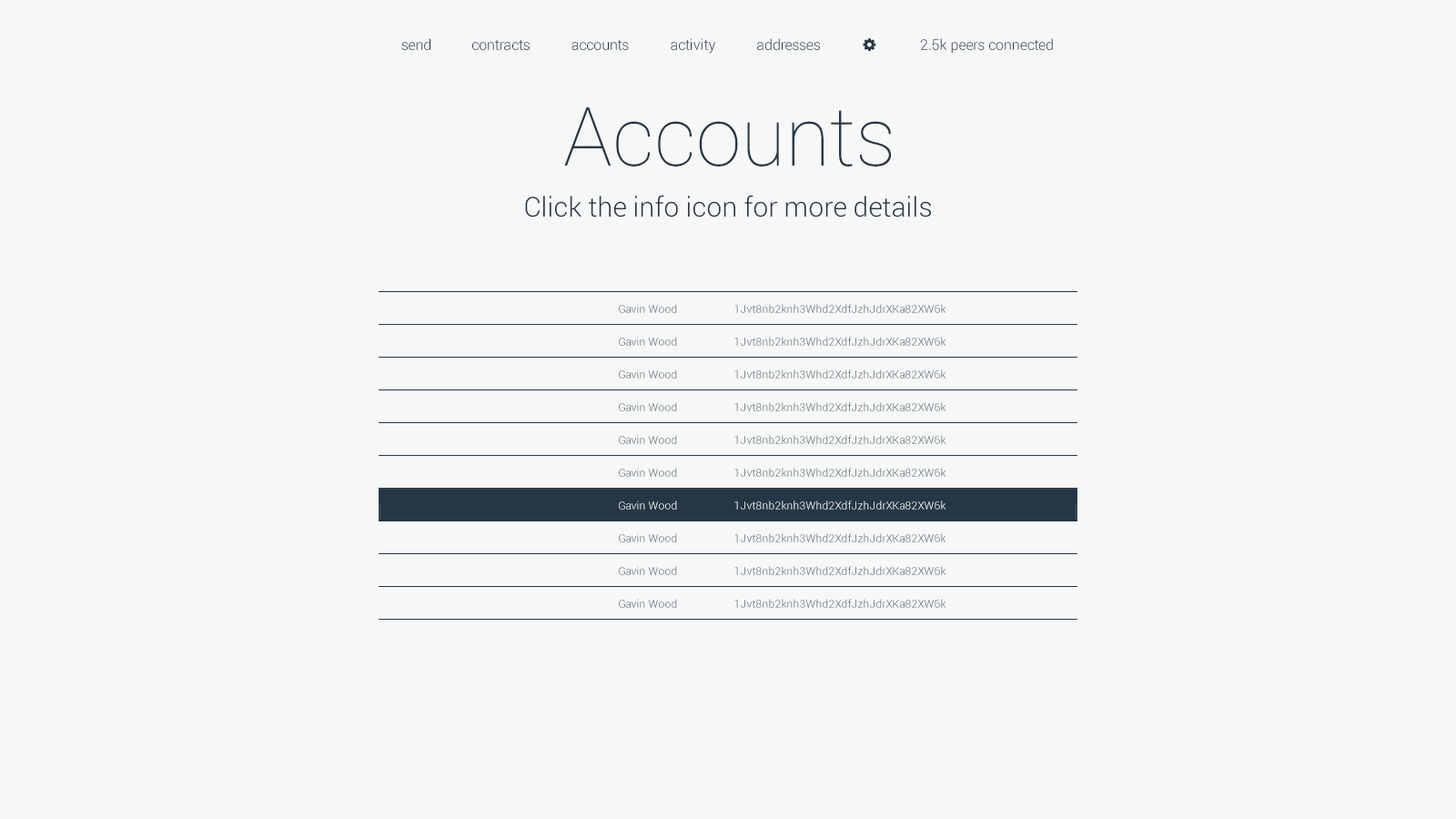
<style>
.page{position:relative;width:1456px;height:819px;background:#f6f7f7}
.page>*{position:absolute;margin:0}
.t1{font:14.6px "Roboto-Light";color:#253746}
.t2{font:81.9px "Roboto-Thin";color:#253746}
.t3{font:27.3px "Roboto-Light";color:#253746}
.t4{font:10.9px "Roboto-Light"}
.t5{font:10.9px "Roboto-Light";color:#ffffff}
</style>
<div class="page">
<p class="t1" style="left:401px;top:38px;width:29px;height:12px">send</p>
<p class="t1" style="left:472px;top:40px;width:58px;height:10px">contracts</p>
<p class="t1" style="left:571px;top:40px;width:58px;height:10px">accounts</p>
<p class="t1" style="left:671px;top:38px;width:44px;height:16px">activity</p>
<p class="t1" style="left:757px;top:38px;width:63px;height:12px">addresses</p>
<p class="t1" style="left:920px;top:38px;width:133px;height:15px">2.5k peers connected</p>
<p class="t2" style="left:564px;top:107px;width:327px;height:60px">Accounts</p>
<p class="t3" style="left:525px;top:195px;width:406px;height:22px">Click the info icon for more details</p>
<p class="t4" style="left:619px;top:304px;width:58px;height:9px">Gavin Wood</p>
<p class="t4" style="left:734px;top:304px;width:212px;height:9px">1Jvt8nb2knh3Whd2XdfJzhJdrXKa82XW6k</p>
<p class="t4" style="left:619px;top:337px;width:58px;height:9px">Gavin Wood</p>
<p class="t4" style="left:734px;top:337px;width:212px;height:9px">1Jvt8nb2knh3Whd2XdfJzhJdrXKa82XW6k</p>
<p class="t4" style="left:619px;top:369px;width:58px;height:10px">Gavin Wood</p>
<p class="t4" style="left:734px;top:369px;width:212px;height:10px">1Jvt8nb2knh3Whd2XdfJzhJdrXKa82XW6k</p>
<p class="t4" style="left:619px;top:402px;width:58px;height:9px">Gavin Wood</p>
<p class="t4" style="left:734px;top:402px;width:212px;height:9px">1Jvt8nb2knh3Whd2XdfJzhJdrXKa82XW6k</p>
<p class="t4" style="left:619px;top:435px;width:58px;height:9px">Gavin Wood</p>
<p class="t4" style="left:734px;top:435px;width:212px;height:9px">1Jvt8nb2knh3Whd2XdfJzhJdrXKa82XW6k</p>
<p class="t4" style="left:619px;top:468px;width:58px;height:9px">Gavin Wood</p>
<p class="t4" style="left:734px;top:468px;width:212px;height:9px">1Jvt8nb2knh3Whd2XdfJzhJdrXKa82XW6k</p>
<p class="t5" style="left:619px;top:500px;width:58px;height:10px">Gavin Wood</p>
<p class="t4" style="left:734px;top:500px;width:212px;height:10px">1Jvt8nb2knh3Whd2XdfJzhJdrXKa82XW6k</p>
<p class="t4" style="left:619px;top:533px;width:58px;height:9px">Gavin Wood</p>
<p class="t4" style="left:734px;top:533px;width:212px;height:9px">1Jvt8nb2knh3Whd2XdfJzhJdrXKa82XW6k</p>
<p class="t4" style="left:619px;top:566px;width:58px;height:9px">Gavin Wood</p>
<p class="t4" style="left:734px;top:566px;width:212px;height:9px">1Jvt8nb2knh3Whd2XdfJzhJdrXKa82XW6k</p>
<p class="t4" style="left:619px;top:599px;width:58px;height:9px">Gavin Wood</p>
<p class="t4" style="left:734px;top:599px;width:212px;height:9px">1Jvt8nb2knh3Whd2XdfJzhJdrXKa82XW6k</p>
</div>
